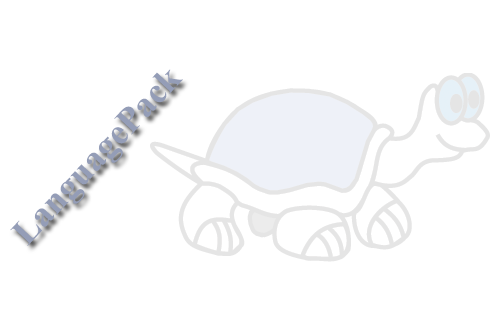
<style>
.page{position:relative;width:503px;height:314px;background:#ffffff}
.page>*{position:absolute;margin:0}
.t1{font:36px "TimesNewRomanPS-BoldMT";color:#949db7}
</style>
<div class="page">
<p class="t1" style="left:10px;top:69px;width:173px;height:177px;rotate:-47deg">LanguagePack</p>
</div>
